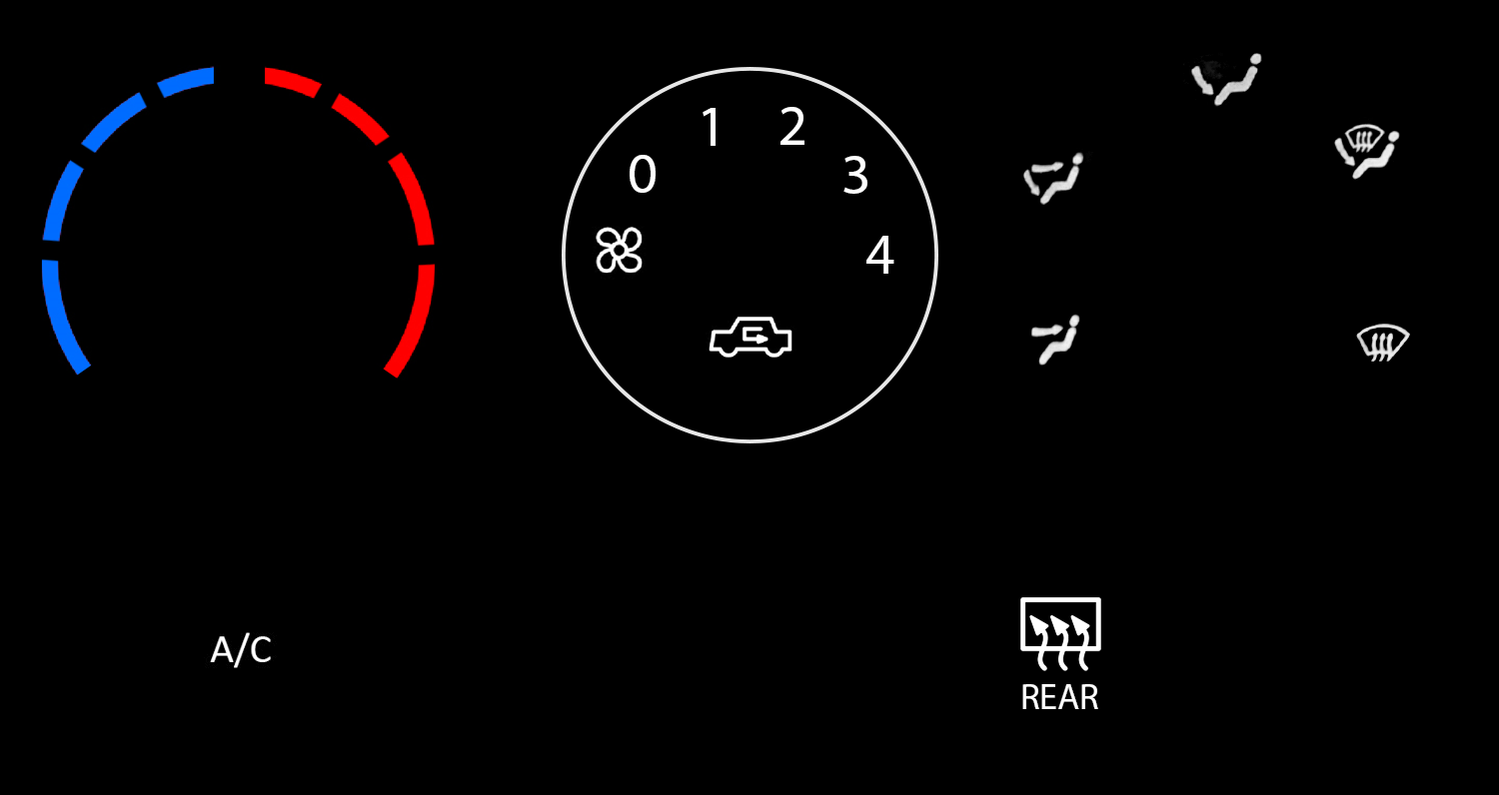
<style>
.page{position:relative;width:1499px;height:795px;background:#000000}
.page>*{position:absolute;margin:0}
.t1{font:58px "MyriadPro-Regular";color:#ffffff}
.t2{font:36.4px "MyriadPro-Regular";color:#ffffff}
</style>
<div class="page">
<p class="t1" style="left:703px;top:108px;width:13px;height:38px">1</p>
<p class="t1" style="left:780px;top:107px;width:24px;height:38px">2</p>
<p class="t1" style="left:630px;top:155px;width:26px;height:38px">0</p>
<p class="t1" style="left:843px;top:156px;width:24px;height:38px">3</p>
<p class="t1" style="left:866px;top:236px;width:28px;height:38px">4</p>
<p class="t2" style="left:1022px;top:685px;width:76px;height:25px">REAR</p>
</div>
